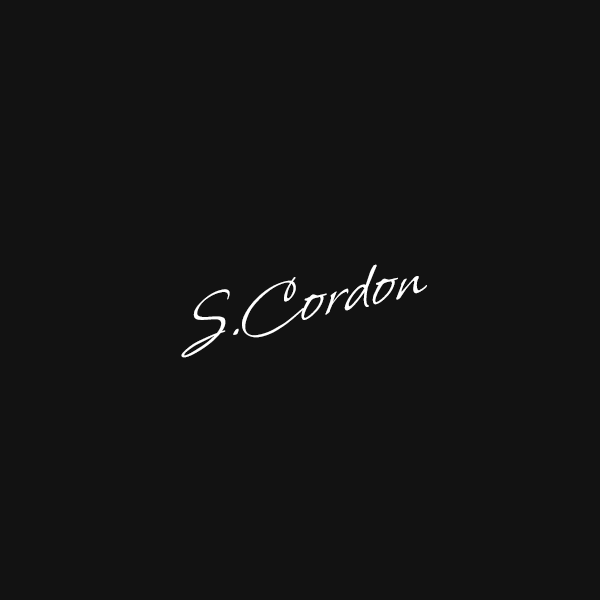
<style>
.page{position:relative;width:600px;height:600px;background:#121212}
.page>*{position:absolute;margin:0}
.t1{font:75.7px "Whisper-Regular";color:#ffffff}
</style>
<div class="page">
<p class="t1" style="left:181px;top:264px;width:246px;height:94px;rotate:-12deg">S.Cordon</p>
</div>
